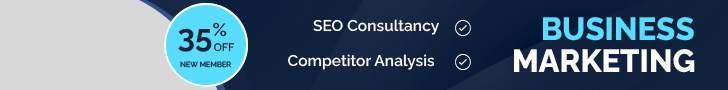
<style>
.page{position:relative;width:728px;height:90px;background:#d7d7d7}
.page>*{position:absolute;margin:0}
.t1{font:31.9px "Raleway-ExtraBold";color:#58ddfe}
.t2{font:31.5px "Raleway-Bold";color:#192437}
.t3{font:15.5px "Raleway-SemiBold";color:#ffffff}
.t4{font:10.8px "Raleway-Medium";color:#192437}
.t5{font:31.9px "Raleway-ExtraBold";color:#ffffff}
.t6{font:7.4px "Raleway-Medium";color:#192437}
</style>
<div class="page">
<p class="t1" style="left:543px;top:17px;width:151px;height:24px">BUSINESS</p>
<p class="t2" style="left:178px;top:22px;width:49px;height:30px">35%</p>
<p class="t3" style="left:313px;top:19px;width:126px;height:16px">SEO Consultancy</p>
<p class="t4" style="left:214px;top:43px;width:21px;height:9px">OFF</p>
<p class="t3" style="left:287px;top:54px;width:148px;height:16px">Competitor Analysis</p>
<p class="t5" style="left:514px;top:49px;width:181px;height:24px">MARKETING</p>
<p class="t6" style="left:180px;top:61px;width:51px;height:7px">NEW MEMBER</p>
</div>
